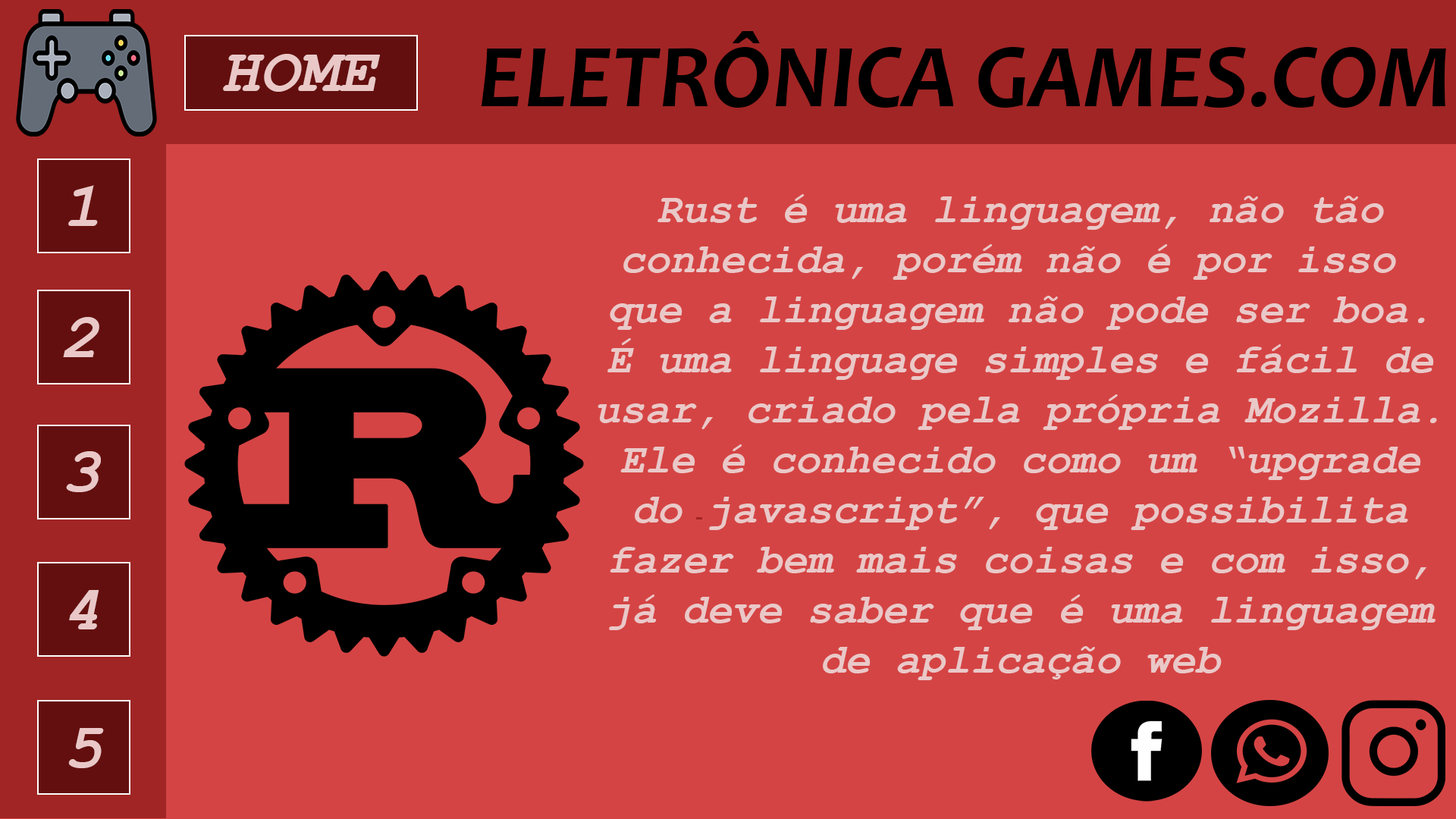
<style>
.page{position:relative;width:1456px;height:819px;background:#d54444}
.page>*{position:absolute;margin:0}
.t1{font:91px "Candara-BoldItalic";color:#000000}
.t2{font:64.5px "CourierNewPS-BoldItalicMT";color:#eac8c8}
.t3{font:41.7px "CourierNewPS-BoldItalicMT";color:#eac8c8}
</style>
<div class="page">
<p class="t1" style="left:481px;top:31px;width:965px;height:77px">ELETRÔNICA GAMES.COM</p>
<p class="t2" style="left:223px;top:54px;width:157px;height:38px">HOME</p>
<p class="t2" style="left:68px;top:185px;width:30px;height:41px">1</p>
<p class="t3" style="left:598px;top:194px;width:839px;height:486px;text-align:center">Rust é uma linguagem, não tão<br>conhecida, porém não é por isso <br>que a linguagem não pode ser boa.<br>É uma linguage simples e fácil de<br>usar, criado pela própria Mozilla.<br>Ele é conhecido como um “upgrade<br>do javascript”, que possibilita<br>fazer bem mais coisas e com isso,<br>já deve saber que é uma linguagem<br>de aplicação web</p>
<p class="t2" style="left:63px;top:317px;width:36px;height:40px">2</p>
<p class="t2" style="left:66px;top:451px;width:35px;height:41px">3</p>
<p class="t2" style="left:69px;top:590px;width:30px;height:39px">4</p>
<p class="t2" style="left:68px;top:728px;width:36px;height:40px">5</p>
</div>
